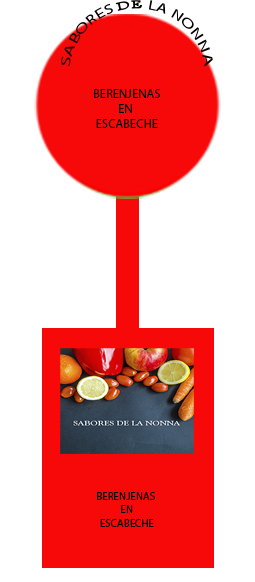
<style>
.page{position:relative;width:255px;height:582px;background:#ffffff}
.page>*{position:absolute;margin:0}
.t1{font:12.6px "MyriadPro-Regular";color:#040000}
.t2{font:12.6px "GoudyOldStyleT-Bold";color:#040000}
.t3{font:11px "MyriadPro-Regular";color:#040000}
</style>
<div class="page">
<p class="t1" style="left:61px;top:0px;width:152px;height:67px">SABORES <span class="t2">DE </span>LA NONNA</p>
<p class="t1" style="left:94px;top:89px;width:66px;height:39px;text-align:center">BERENJENAS<br>EN <br>ESCABECHE</p>
<p class="t3" style="left:97px;top:492px;width:58px;height:35px;text-align:center">BERENJENAS <br>EN<br>ESCABECHE</p>
</div>
